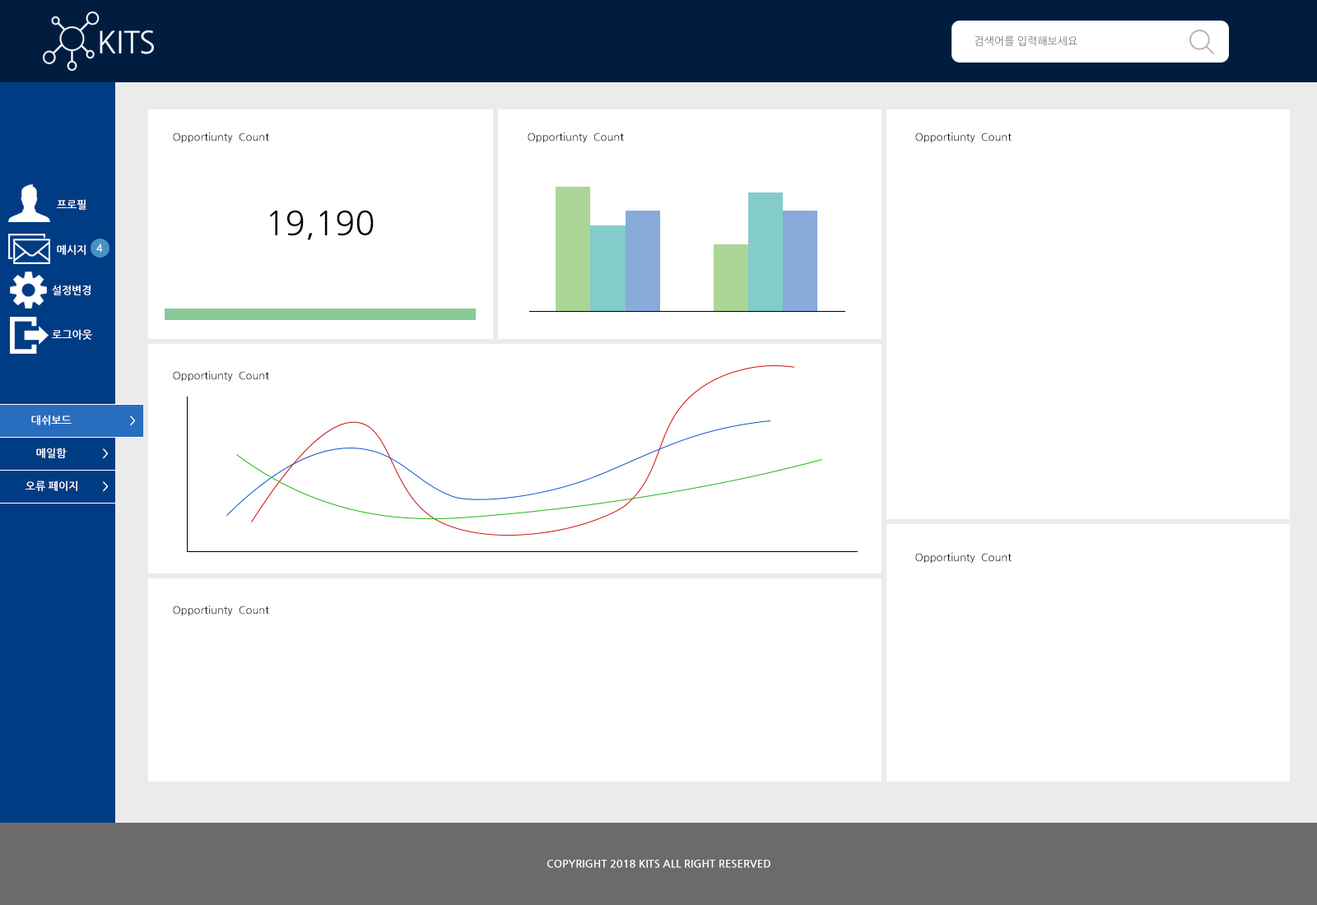
<style>
.page{position:relative;width:1317px;height:905px;background:#ffffff}
.page>*{position:absolute;margin:0}
.t1{font:10.7px "NanumGothic";color:#737373;text-transform:uppercase}
.t2{font:10.7px "NanumGothic";color:#000000}
.t3{font:10.7px "NanumGothicBold";color:#ffffff;text-transform:uppercase}
.t4{font:32.9px "NanumGothic";color:#000000}
</style>
<div class="page">
<p class="t1" style="left:975px;top:35px;width:102px;height:11px">검색어를 입력해보세요</p>
<p class="t2" style="left:173px;top:133px;width:96px;height:10px">Opportiunty  Count</p>
<p class="t2" style="left:528px;top:133px;width:96px;height:10px">Opportiunty  Count</p>
<p class="t2" style="left:915px;top:133px;width:97px;height:10px">Opportiunty  Count</p>
<p class="t3" style="left:57px;top:199px;width:29px;height:11px">프로필</p>
<p class="t4" style="left:270px;top:210px;width:104px;height:30px">19,190</p>
<p class="t3" style="left:57px;top:244px;width:29px;height:11px">메시지</p>
<p class="t3" style="left:96px;top:244px;width:7px;height:9px">4</p>
<p class="t3" style="left:52px;top:285px;width:39px;height:10px">설정변경</p>
<p class="t3" style="left:52px;top:329px;width:40px;height:11px">로그아웃</p>
<p class="t2" style="left:173px;top:371px;width:96px;height:11px">Opportiunty  Count</p>
<p class="t3" style="left:31px;top:415px;width:41px;height:11px">대쉬보드</p>
<p class="t3" style="left:130px;top:416px;width:5px;height:10px">&gt;</p>
<p class="t3" style="left:36px;top:448px;width:31px;height:10px">메일함</p>
<p class="t3" style="left:103px;top:449px;width:5px;height:10px">&gt;</p>
<p class="t3" style="left:26px;top:481px;width:51px;height:10px">오류 페이지</p>
<p class="t3" style="left:103px;top:482px;width:5px;height:10px">&gt;</p>
<p class="t2" style="left:915px;top:553px;width:97px;height:11px">Opportiunty  Count</p>
<p class="t2" style="left:173px;top:606px;width:96px;height:11px">Opportiunty  Count</p>
<p class="t3" style="left:547px;top:860px;width:223px;height:8px">copyright 2018 kits all right reserved</p>
</div>
